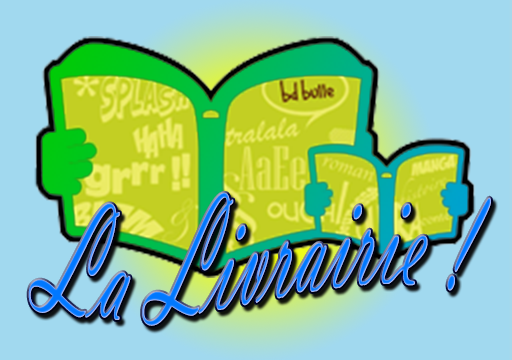
<style>
.page{position:relative;width:512px;height:360px;background:#a1d9ef}
.page>*{position:absolute;margin:0}
.t1{font:180px "VladimirScript";scale:0.5 1}
</style>
<div class="page">
<p class="t1" style="left:28px;top:193px;width:463px;height:133px">La Livrairie !</p>
</div>
